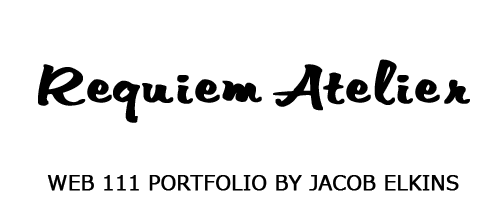
<style>
.page{position:relative;width:500px;height:200px;background:#ffffff}
.page>*{position:absolute;margin:0}
.t1{font:60px "VNI-Thufap3";color:#000000;font-weight:bold}
.t2{font:20px "Meiryo";color:#000000;font-weight:bold}
</style>
<div class="page">
<p class="t1" style="left:38px;top:59px;width:432px;height:64px">Requiem Atelier</p>
<p class="t2" style="left:47px;top:175px;width:412px;height:16px">WEB 111 PORTFOLIO BY JACOB ELKINS</p>
</div>
